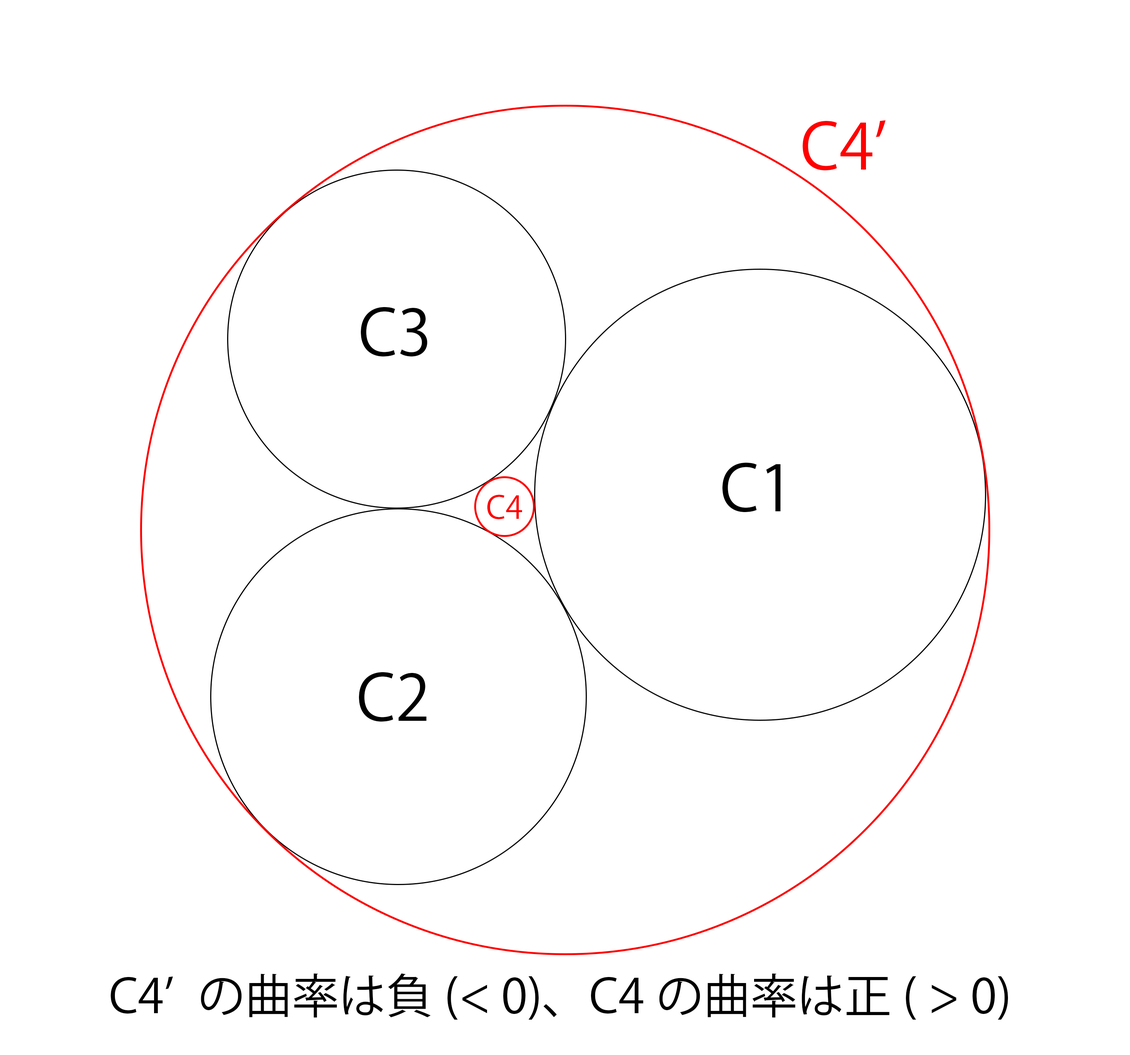
<style>
.page{position:relative;width:1130px;height:1055px;background:#ffffff}
.page>*{position:absolute;margin:0}
.t1{font:62.8px "KozGoPr6N-Regular";color:#ff0000}
.t2{font:62.8px "KozGoPr6N-Regular";color:#000000}
.t3{font:31.4px "KozGoPr6N-Regular";color:#ff0000}
.t4{font:47.1px "KozGoPr6N-Regular";color:#000000}
</style>
<div class="page">
<p class="t1" style="left:803px;top:120px;width:83px;height:51px">C4’</p>
<p class="t2" style="left:361px;top:307px;width:67px;height:50px">C3</p>
<p class="t2" style="left:723px;top:462px;width:58px;height:50px">C1</p>
<p class="t3" style="left:487px;top:495px;width:35px;height:24px">C4<br>5</p>
<p class="t2" style="left:359px;top:672px;width:68px;height:50px">C2</p>
<p class="t4" style="left:111px;top:973px;width:897px;height:47px">C4’の曲率は負 (&lt; 0)、C4の曲率は正 ( &gt; 0)</p>
</div>
